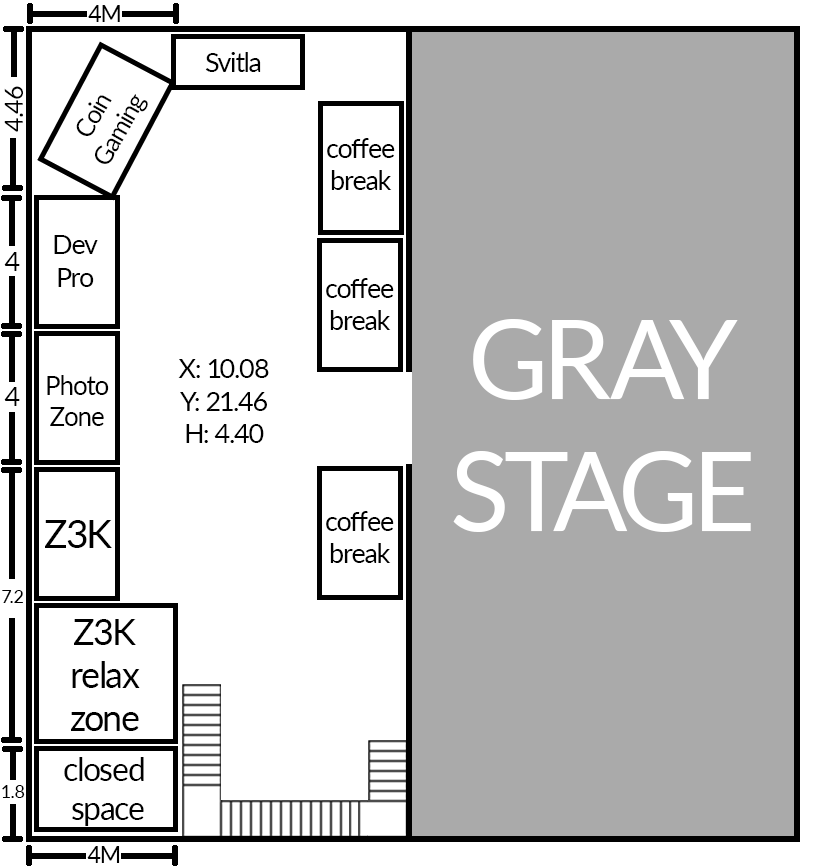
<style>
.page{position:relative;width:826px;height:868px;background:#ffffff}
.page>*{position:absolute;margin:0}
.t1{font:23px "Lato-Regular";letter-spacing:-0.04em;color:#000000}
.t2{font:27px "Lato-Regular";letter-spacing:-0.04em;color:#000000}
.t3{font:25px "Lato-Regular";letter-spacing:-0.04em;color:#000000}
.t4{font:110px "Lato-Regular";letter-spacing:-0.04em;color:#ffffff}
.t5{font:26px "Lato-Regular";letter-spacing:-0.04em;color:#000000}
.t6{font:39px "Lato-Regular";letter-spacing:-0.04em;color:#000000}
.t7{font:18px "Lato-Regular";letter-spacing:-0.04em;color:#000000}
.t8{font:36px "Lato-Regular";letter-spacing:-0.04em;color:#000000}
.t9{font:32px "Lato-Regular";letter-spacing:-0.04em;color:#000000}
</style>
<div class="page">
<p class="t1" style="left:88px;top:5px;width:32px;height:17px">4М</p>
<p class="t2" style="left:205px;top:52px;width:56px;height:20px">Svitla</p>
<p class="t3" style="left:4px;top:86px;width:19px;height:46px;rotate:-90deg">4.46</p>
<p class="t3" style="left:76px;top:94px;width:72px;height:70px;text-align:center;rotate:-60deg">Coin<br>Gaming</p>
<p class="t2" style="left:327px;top:138px;width:68px;height:52px;text-align:center">coffee<br>break</p>
<p class="t2" style="left:54px;top:235px;width:44px;height:52px;text-align:center">Dev<br>Pro</p>
<p class="t2" style="left:4px;top:252px;width:16px;height:19px">4</p>
<p class="t2" style="left:326px;top:278px;width:68px;height:52px;text-align:center">coffee<br>break</p>
<p class="t4" style="left:453px;top:319px;width:298px;height:213px;text-align:center">GRAY<br>STAGE</p>
<p class="t2" style="left:178px;top:359px;width:91px;height:84px;text-align:center">X: 10.08<br>Y: 21.46<br>H: 4.40</p>
<p class="t5" style="left:47px;top:375px;width:62px;height:51px;text-align:center">Photo<br>Zone</p>
<p class="t2" style="left:4px;top:387px;width:16px;height:19px">4</p>
<p class="t6" style="left:45px;top:520px;width:67px;height:28px">Z3K</p>
<p class="t2" style="left:326px;top:511px;width:68px;height:52px;text-align:center">coffee<br>break</p>
<p class="t7" style="left:2px;top:590px;width:21px;height:13px">7.2</p>
<p class="t8" style="left:71px;top:619px;width:69px;height:112px;text-align:center">Z3K<br>relax<br>zone</p>
<p class="t9" style="left:64px;top:757px;width:80px;height:69px;text-align:center">closed <br>space</p>
<p class="t7" style="left:2px;top:785px;width:23px;height:13px">1.8</p>
<p class="t1" style="left:87px;top:846px;width:33px;height:17px">4М</p>
</div>
